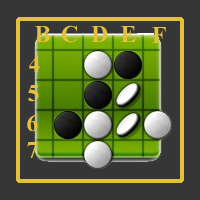
<style>
.page{position:relative;width:200px;height:200px;background:#363636}
.page>*{position:absolute;margin:0}
.t1{font:23.9px "TimesNewRomanPS-BoldMT";color:#e3c13b}
</style>
<div class="page">
<p class="t1" style="left:35px;top:26px;width:15px;height:16px">B</p>
<p class="t1" style="left:62px;top:25px;width:15px;height:18px">C</p>
<p class="t1" style="left:91px;top:26px;width:17px;height:16px">D</p>
<p class="t1" style="left:121px;top:26px;width:15px;height:16px">E</p>
<p class="t1" style="left:152px;top:27px;width:14px;height:16px">F</p>
<p class="t1" style="left:29px;top:55px;width:11px;height:17px">4</p>
<p class="t1" style="left:28px;top:85px;width:11px;height:17px">5</p>
<p class="t1" style="left:27px;top:114px;width:11px;height:18px">6</p>
<p class="t1" style="left:27px;top:142px;width:11px;height:16px">7</p>
</div>
